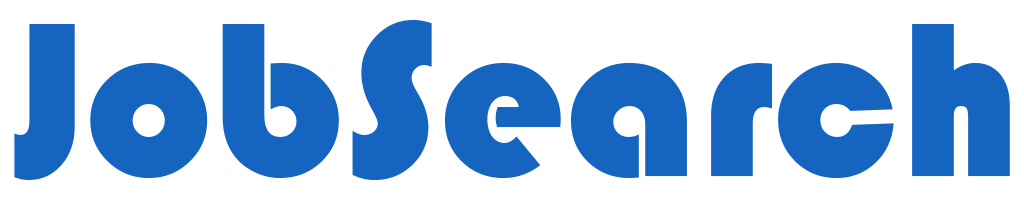
<style>
.page{position:relative;width:1024px;height:204px;background:#ffffff}
.page>*{position:absolute;margin:0}
.t1{font:228px "Bauhaus93";color:#1565c0}
</style>
<div class="page">
<p class="t1" style="left:14px;top:20px;width:996px;height:160px">JobSearch</p>
</div>
